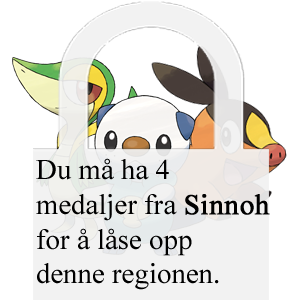
<style>
.page{position:relative;width:300px;height:300px;background:#ffffff}
.page>*{position:absolute;margin:0}
.t1{font:28.8px "TimesNewRomanPSMT";color:#000000}
.t2{font:28.8px "TimesNewRomanPSMT";color:#000000;font-weight:bold}
</style>
<div class="page">
<p class="t1" style="left:36px;top:158px;width:234px;height:132px">Du må ha 4 <br>medaljer fra <span class="t2">Sinnoh<br></span>for å låse opp <br>denne regionen.</p>
</div>
